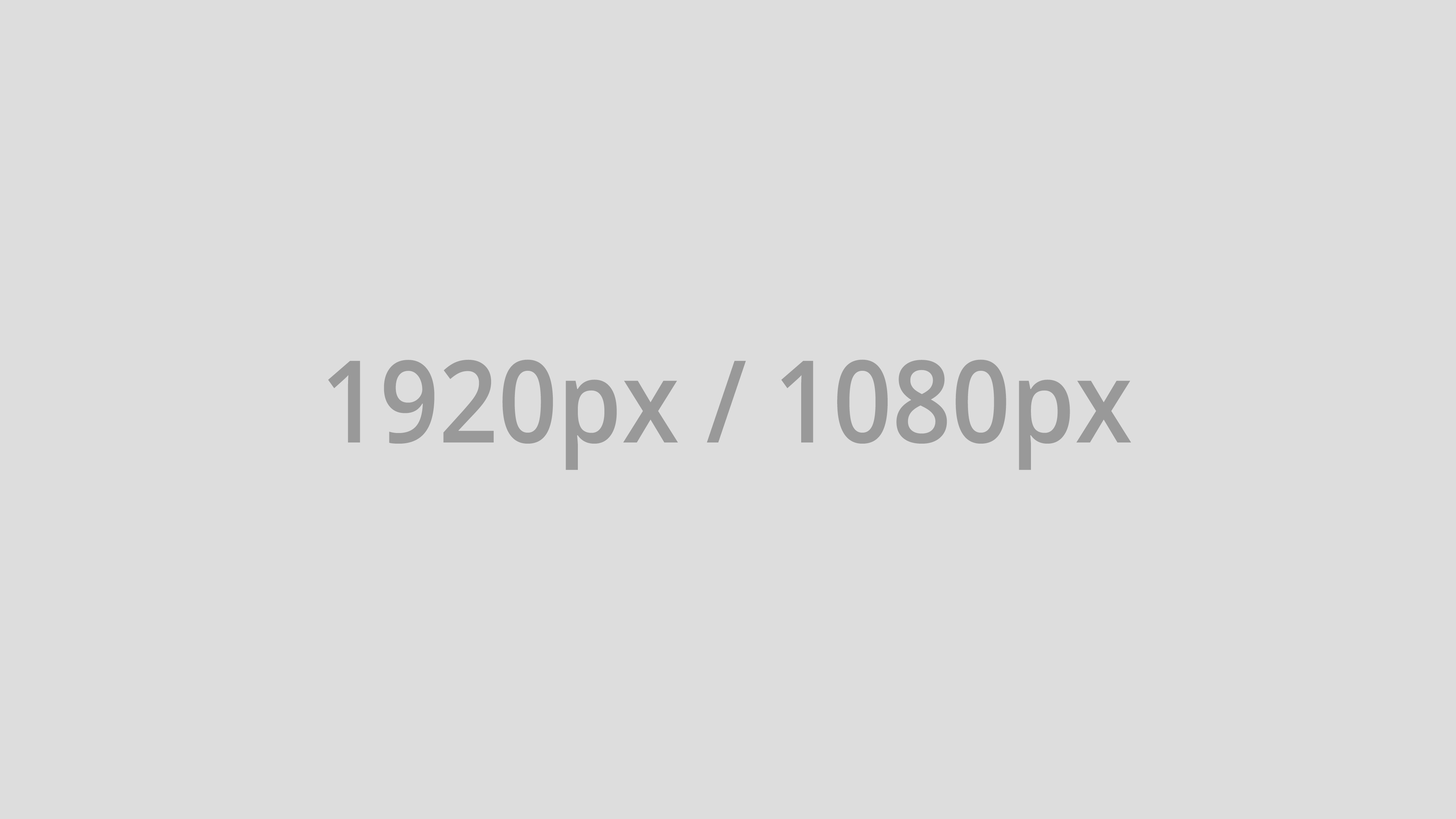
<style>
.page{position:relative;width:1456px;height:819px;background:#dddddd}
.page>*{position:absolute;margin:0}
.t1{font:114.2px "OpenSans-Semibold";color:#999999;scale:0.91 1}
</style>
<div class="page">
<p class="t1" style="left:328px;top:359px;width:803px;height:111px">1920px / 1080px</p>
</div>
